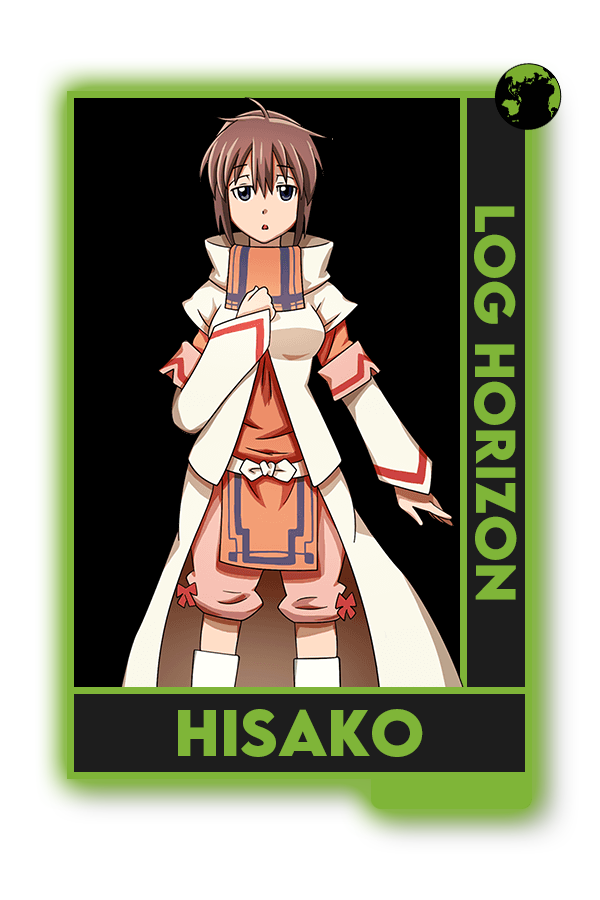
<style>
.page{position:relative;width:600px;height:900px;background:#ffffff}
.page>*{position:absolute;margin:0}
.t1{font:50px "LEMONMILK-Bold";color:#7fad41}
.t2{font:58.3px "LEMONMILK-Bold";color:#7fad41}
</style>
<div class="page">
<p class="t1" style="left:474px;top:206px;width:43px;height:394px;rotate:90deg">Log Horizon</p>
<p class="t2" style="left:178px;top:709px;width:245px;height:48px">Hisako</p>
</div>
